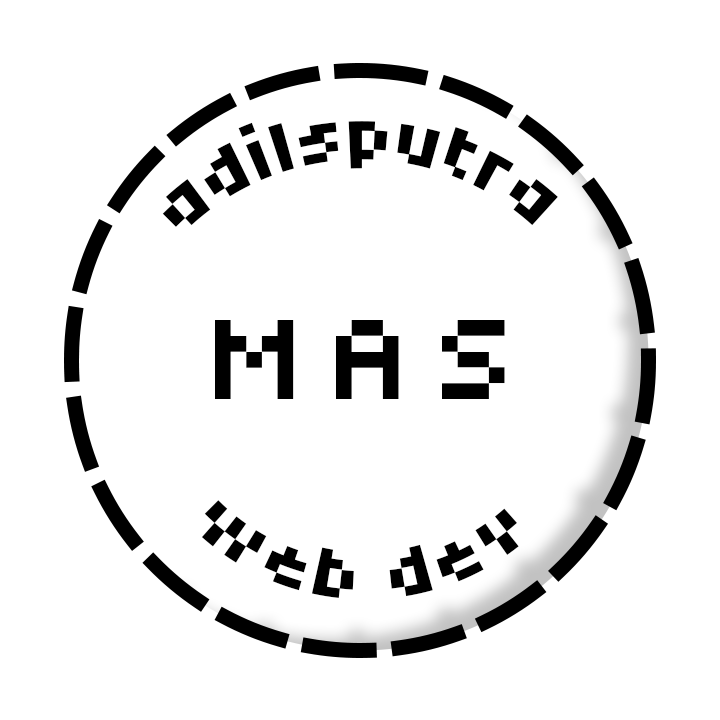
<style>
.page{position:relative;width:720px;height:720px;background:#ffffff}
.page>*{position:absolute;margin:0}
.t1{font:75px "Tiny5-Regular";color:#000000}
.t2{font:125px "Tiny5-Regular";letter-spacing:0.22em;color:#000000}
</style>
<div class="page">
<p class="t1" style="left:162px;top:121px;width:396px;height:106px">adilsputra</p>
<p class="t2" style="left:215px;top:320px;width:290px;height:79px">MAS</p>
<p class="t1" style="left:201px;top:500px;width:318px;height:98px">web dev</p>
</div>
